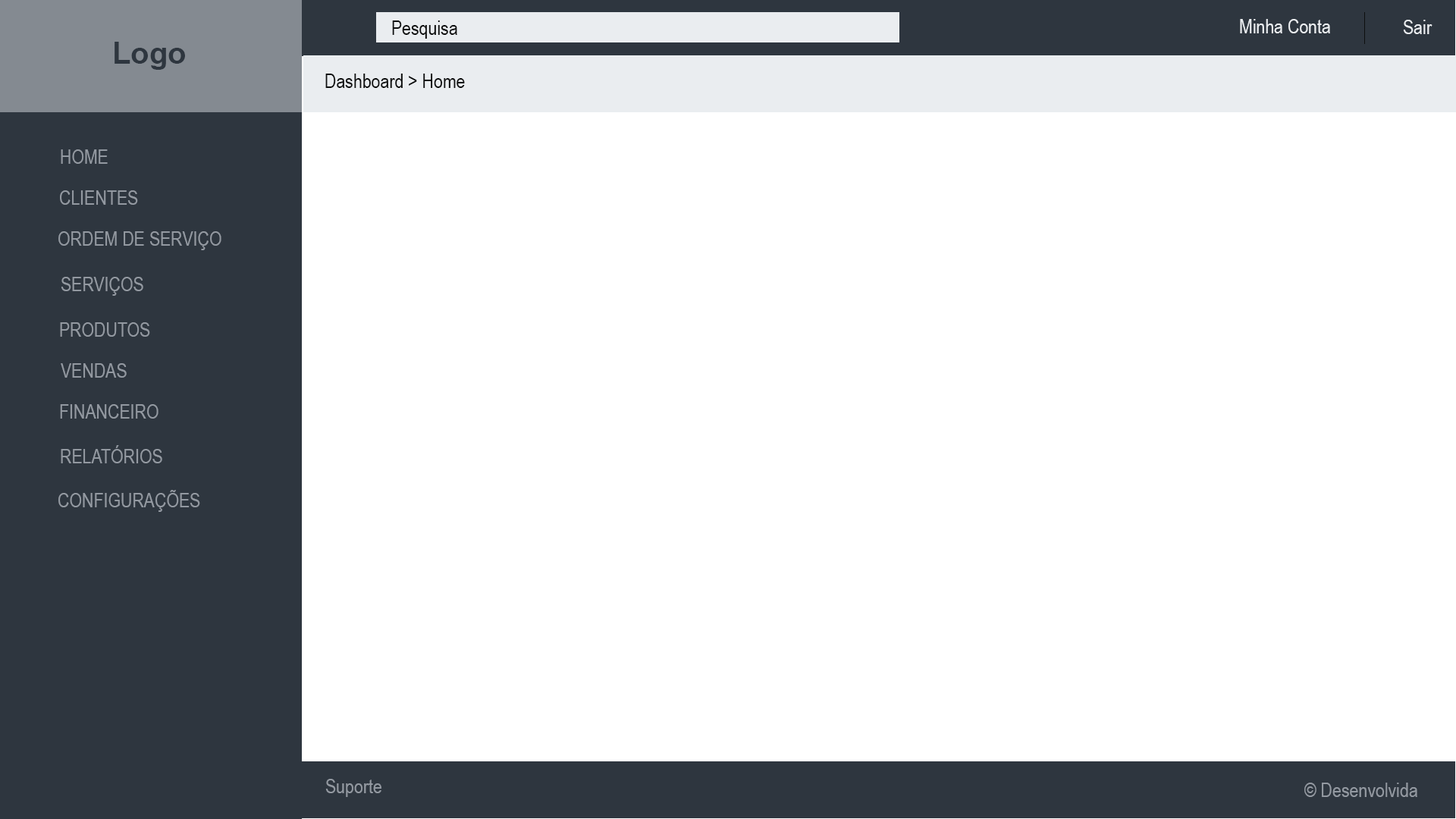
<style>
.page{position:relative;width:1456px;height:819px;background:#ffffff}
.page>*{position:absolute;margin:0}
.t1{font:19.7px "ArialNarrow";color:#0e0f0f}
.t2{font:19.7px "ArialNarrow";color:#eaedf0}
.t3{font:30.3px "Arial-BoldMT";color:#2e363f}
.t4{font:19.7px "ArialNarrow";color:#9399a1}
</style>
<div class="page">
<p class="t1" style="left:392px;top:20px;width:65px;height:19px">Pesquisa</p>
<p class="t2" style="left:1240px;top:19px;width:90px;height:14px">Minha Conta</p>
<p class="t2" style="left:1403px;top:20px;width:29px;height:14px">Sair</p>
<p class="t3" style="left:115px;top:42px;width:70px;height:28px">Logo</p>
<p class="t1" style="left:325px;top:74px;width:140px;height:14px">Dashboard &gt; Home</p>
<p class="t4" style="left:61px;top:149px;width:47px;height:15px">HOME</p>
<p class="t4" style="left:60px;top:190px;width:78px;height:15px">CLIENTES</p>
<p class="t4" style="left:58px;top:231px;width:163px;height:19px">ORDEM DE SERVIÇO</p>
<p class="t4" style="left:61px;top:277px;width:82px;height:19px">SERVIÇOS</p>
<p class="t4" style="left:60px;top:322px;width:90px;height:15px">PRODUTOS</p>
<p class="t4" style="left:61px;top:363px;width:66px;height:15px">VENDAS</p>
<p class="t4" style="left:60px;top:404px;width:98px;height:15px">FINANCEIRO</p>
<p class="t4" style="left:61px;top:445px;width:101px;height:18px">RELATÓRIOS</p>
<p class="t4" style="left:58px;top:490px;width:142px;height:22px">CONFIGURAÇÕES</p>
<p class="t4" style="left:325px;top:779px;width:56px;height:18px">Suporte</p>
<p class="t4" style="left:1304px;top:783px;width:113px;height:14px">© Desenvolvida</p>
</div>
